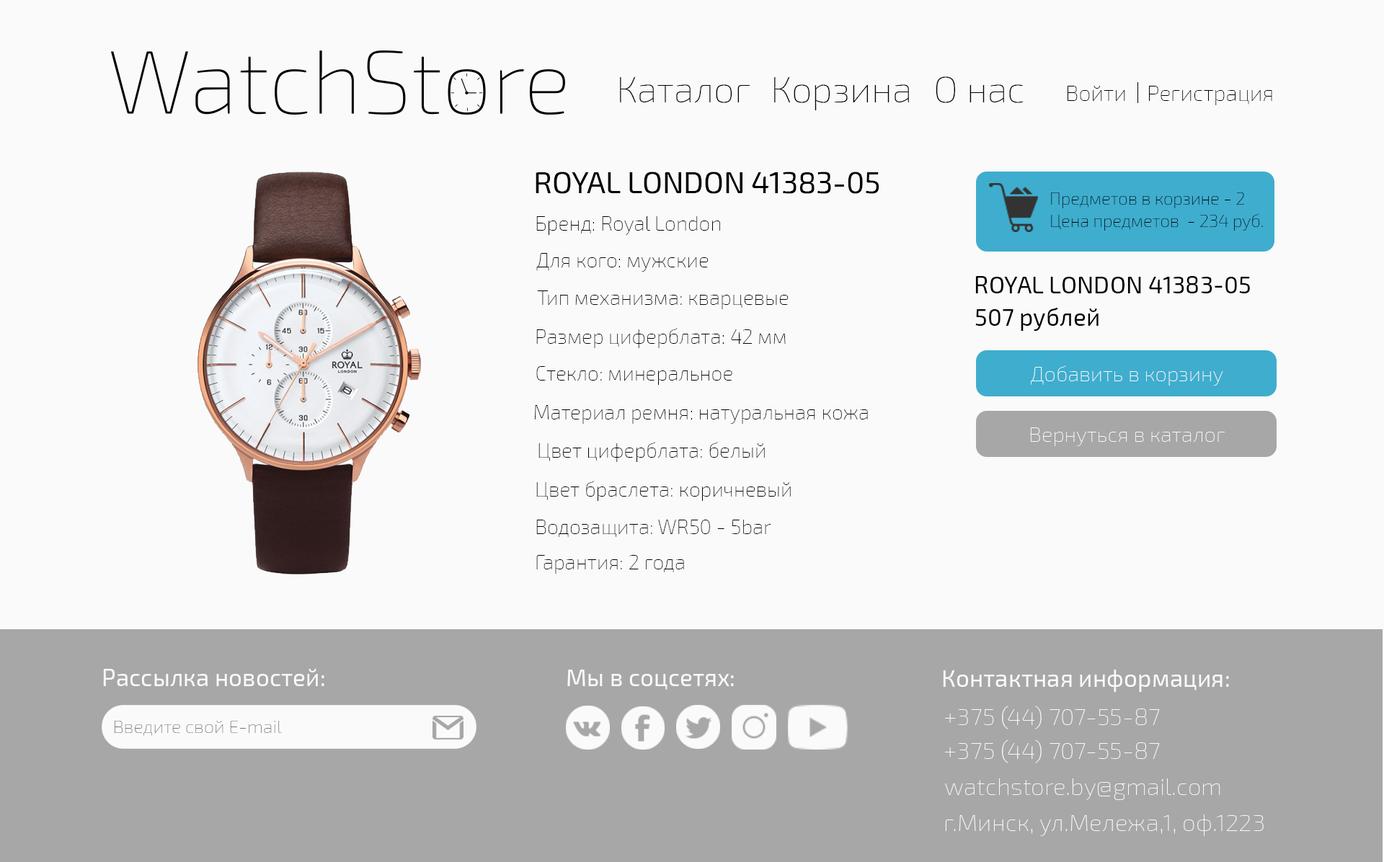
<style>
.page{position:relative;width:1384px;height:862px;background:#fafafa}
.page>*{position:absolute;margin:0}
.t1{font:36.9px "Exo2-Thin";color:#000000}
.t2{font:21.8px "Exo2-Thin";color:#000000}
.t3{font:30px "Exo2-Regular";color:#000000}
.t4{font:17.1px/22.8px "Exo2-Thin";color:#000000}
.t5{font:20.3px "Exo2-Thin";color:#000000}
.t6{font:24px "Exo2-Regular";color:#000000}
.t7{font:21px "Exo2-Thin";color:#fafafa}
.t8{font:24px "Exo2-Regular";color:#fafafa}
.t9{font:24px "Exo2-Thin";color:#fafafa}
.t10{font:18.1px "Exo2-Thin";color:#767676}
</style>
<div class="page">
<p class="t1" style="left:620px;top:77px;width:129px;height:26px">Каталог</p>
<p class="t1" style="left:774px;top:77px;width:135px;height:33px">Корзина</p>
<p class="t1" style="left:935px;top:76px;width:88px;height:27px">О нас</p>
<p class="t2" style="left:1067px;top:86px;width:58px;height:15px">Войти</p>
<p class="t2" style="left:1149px;top:86px;width:123px;height:19px">Регистрация</p>
<p class="t3" style="left:535px;top:172px;width:344px;height:22px">ROYAL LONDON 41383-05</p>
<p class="t4" style="left:1051px;top:192px;width:212px;height:39px">Предметов в корзине - 2<br>Цена предметов  - 234 руб.</p>
<p class="t5" style="left:536px;top:216px;width:184px;height:19px">Бренд: Royal London</p>
<p class="t5" style="left:536px;top:253px;width:172px;height:19px">Для кого: мужские</p>
<p class="t6" style="left:975px;top:276px;width:275px;height:17px">ROYAL LONDON 41383-05</p>
<p class="t5" style="left:537px;top:290px;width:251px;height:19px">Тип механизма: кварцевые</p>
<p class="t6" style="left:975px;top:307px;width:123px;height:24px">507 рублей</p>
<p class="t5" style="left:536px;top:328px;width:249px;height:20px">Размер циферблата: 42 мм</p>
<p class="t7" style="left:1030px;top:365px;width:193px;height:21px">Добавить в корзину</p>
<p class="t5" style="left:536px;top:366px;width:196px;height:19px">Стекло: минеральное</p>
<p class="t5" style="left:534px;top:405px;width:334px;height:19px">Материал ремня: натуральная кожа</p>
<p class="t7" style="left:1030px;top:427px;width:194px;height:19px">Вернуться в каталог</p>
<p class="t5" style="left:538px;top:442px;width:227px;height:20px">Цвет циферблата: белый</p>
<p class="t5" style="left:536px;top:481px;width:255px;height:20px">Цвет браслета: коричневый</p>
<p class="t5" style="left:536px;top:520px;width:235px;height:17px">Водозащита: WR50 - 5bar</p>
<p class="t5" style="left:536px;top:555px;width:148px;height:19px">Гарантия: 2 года</p>
<p class="t8" style="left:103px;top:669px;width:221px;height:17px">Рассылка новостей:</p>
<p class="t8" style="left:567px;top:669px;width:167px;height:21px">Мы в соцсетях:</p>
<p class="t8" style="left:943px;top:669px;width:286px;height:23px">Контактная информация:</p>
<p class="t9" style="left:945px;top:705px;width:214px;height:24px">+375 (44) 707-55-87</p>
<p class="t10" style="left:115px;top:721px;width:167px;height:15px">Введите свой E-mail</p>
<p class="t9" style="left:945px;top:739px;width:214px;height:24px">+375 (44) 707-55-87</p>
<p class="t9" style="left:945px;top:778px;width:275px;height:22px">watchstore.by@gmail.com</p>
<p class="t9" style="left:945px;top:814px;width:318px;height:22px">г.Минск, ул.Мележа,1, оф.1223</p>
</div>
